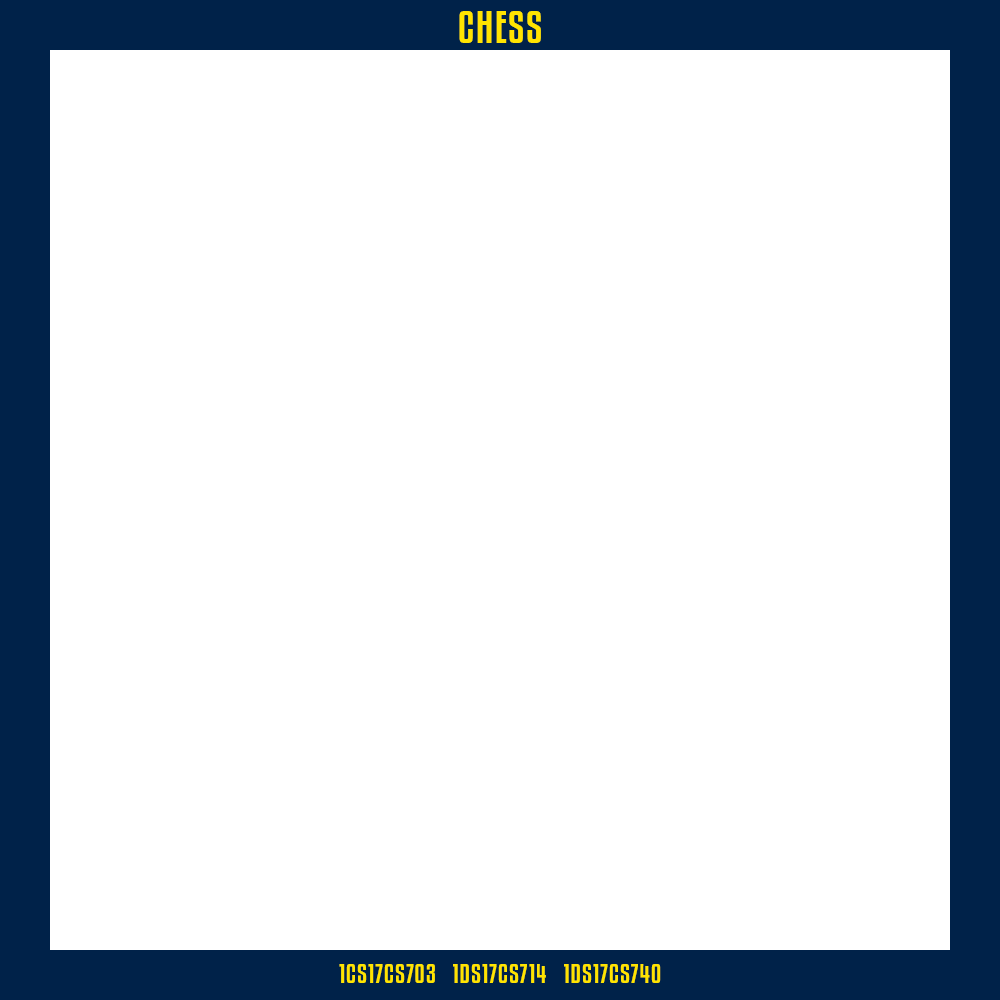
<style>
.page{position:relative;width:1000px;height:1000px;background:#ffffff}
.page>*{position:absolute;margin:0}
.t1{font:40.9px "KenyanCoffeeRg-Regular";letter-spacing:0.04em;color:#ffe400}
.t2{font:25px "KenyanCoffeeRg-Regular";letter-spacing:0.04em;color:#ffe400}
</style>
<div class="page">
<p class="t1" style="left:459px;top:11px;width:82px;height:32px">CHESS</p>
<p class="t2" style="left:339px;top:964px;width:322px;height:19px">1CS17CS703   1DS17CS714   1DS17CS740</p>
</div>
